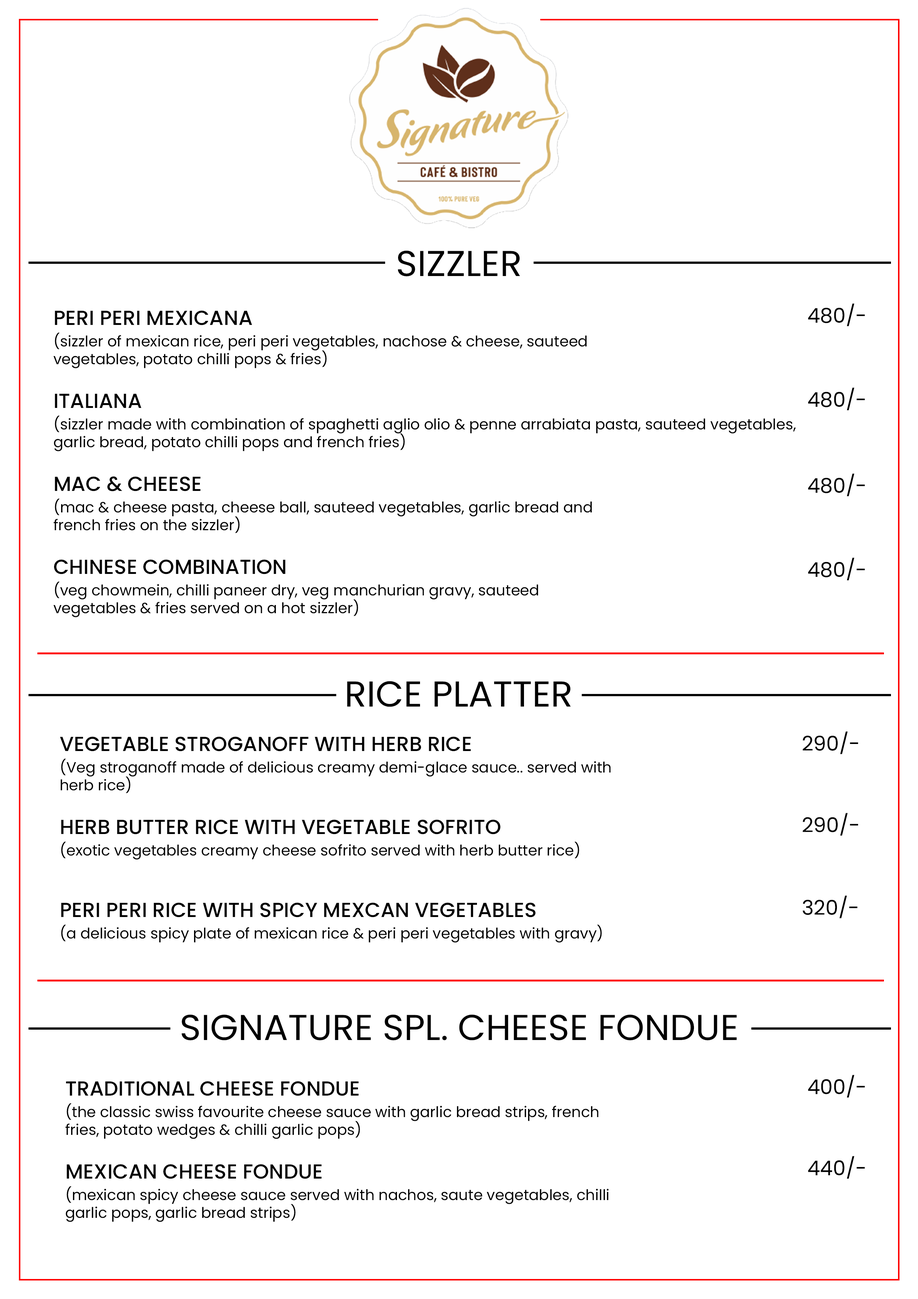
<style>
.page{position:relative;width:918px;height:1299px;background:#ffffff}
.page>*{position:absolute;margin:0}
.t1{font:35.9px "Poppins-Regular";color:#000000;text-transform:uppercase}
.t2{font:20.4px "Poppins-Regular";color:#000000}
.t3{font:14.8px/17.8px "Poppins-Regular";color:#000000}
.t4{font:20.4px/28.7px "Poppins-Medium";color:#000000}
</style>
<div class="page">
<p class="t1" style="left:398px;top:250px;width:122px;height:26px">SIZZLER</p>
<p class="t2" style="left:808px;top:303px;width:57px;height:23px">480/-</p>
<p class="t3" style="left:53px;top:310px;width:534px;height:58px"><span class="t4">PERI PERI MEXICANA<br></span>(sizzler of mexican rice, peri peri vegetables, nachose &amp; cheese, sauteed<br>vegetables, potato chilli pops &amp; fries)</p>
<p class="t2" style="left:808px;top:387px;width:57px;height:23px">480/-</p>
<p class="t3" style="left:54px;top:393px;width:742px;height:58px"><span class="t4">ITALIANA<br></span>(sizzler made with combination of spaghetti aglio olio &amp; penne arrabiata pasta, sauteed vegetables, <br>garlic bread, potato chilli pops and french fries)</p>
<p class="t2" style="left:808px;top:473px;width:57px;height:23px">480/-</p>
<p class="t3" style="left:54px;top:476px;width:538px;height:57px"><span class="t4">MAC &amp; CHEESE<br></span>(mac &amp; cheese pasta, cheese ball, sauteed vegetables, garlic bread and<br>french fries on the sizzler)</p>
<p class="t2" style="left:808px;top:557px;width:57px;height:23px">480/-</p>
<p class="t3" style="left:53px;top:559px;width:485px;height:58px"><span class="t4">CHINESE COMBINATION<br></span>(veg chowmein, chilli paneer dry, veg manchurian gravy, sauteed<br>vegetables &amp; fries served on a hot sizzler)</p>
<p class="t1" style="left:347px;top:681px;width:224px;height:26px">RICE PLATTER</p>
<p class="t3" style="left:60px;top:736px;width:551px;height:57px"><span class="t4">VEGETABLE STROGANOFF WITH HERB RICE<br></span>(Veg stroganoff made of delicious creamy demi-glace sauce.. served with<br>herb rice)</p>
<p class="t2" style="left:803px;top:731px;width:56px;height:23px">290/-</p>
<p class="t3" style="left:61px;top:819px;width:518px;height:40px"><span class="t4">HERB BUTTER RICE WITH VEGETABLE SOFRITO<br></span>(exotic vegetables creamy cheese sofrito served with herb butter rice)</p>
<p class="t2" style="left:803px;top:813px;width:56px;height:23px">290/-</p>
<p class="t3" style="left:61px;top:902px;width:541px;height:40px"><span class="t4">PERI PERI RICE WITH SPICY MEXCAN VEGETABLES<br></span>(a delicious spicy plate of mexican rice &amp; peri peri vegetables with gravy)</p>
<p class="t2" style="left:803px;top:895px;width:55px;height:23px">320/-</p>
<p class="t1" style="left:181px;top:1014px;width:556px;height:26px">SIGNATURE SPL. CHEESE FONDUE</p>
<p class="t3" style="left:66px;top:1081px;width:533px;height:58px"><span class="t4">TRADITIONAL CHEESE FONDUE<br></span>(the classic swiss favourite cheese sauce with garlic bread strips, french<br>fries, potato wedges &amp; chilli garlic pops)</p>
<p class="t2" style="left:808px;top:1075px;width:57px;height:22px">400/-</p>
<p class="t2" style="left:808px;top:1156px;width:57px;height:23px">440/-</p>
<p class="t3" style="left:66px;top:1164px;width:543px;height:58px"><span class="t4">MEXICAN CHEESE FONDUE<br></span>(mexican spicy cheese sauce served with nachos, saute vegetables, chilli<br>garlic pops, garlic bread strips)</p>
</div>
